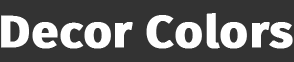
<style>
.page{position:relative;width:294px;height:62px;background:#333333}
.page>*{position:absolute;margin:0}
.t1{font:45.6px "FiraSans-Bold";color:#ffffff;font-weight:bold;scale:1.05 1}
</style>
<div class="page">
<p class="t1" style="left:1px;top:13px;width:292px;height:36px">Decor Colors</p>
</div>
